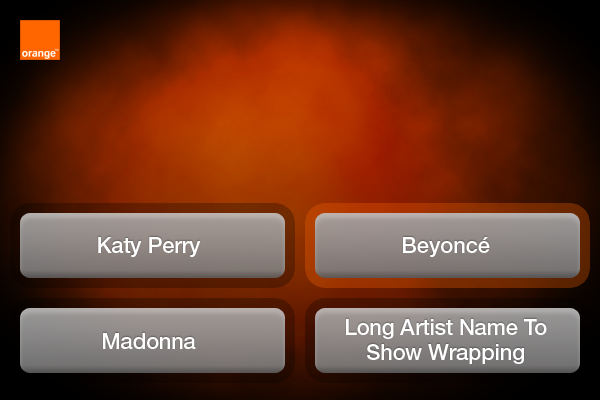
<style>
.page{position:relative;width:600px;height:400px}
.page>*{position:absolute;margin:0}
.t1{font:22px "HelveticaNeueCE-Medium";letter-spacing:-0.01em;color:#ffffff}
</style>
<div class="page">
<p class="t1" style="left:98px;top:237px;width:103px;height:20px">Katy Perry</p>
<p class="t1" style="left:403px;top:237px;width:87px;height:20px">Beyoncé</p>
<p class="t1" style="left:346px;top:319px;width:201px;height:20px">Long Artist Name To</p>
<p class="t1" style="left:103px;top:333px;width:93px;height:16px">Madonna</p>
<p class="t1" style="left:367px;top:344px;width:157px;height:20px">Show Wrapping</p>
</div>
